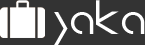
<style>
.page{position:relative;width:145px;height:45px;background:#333333}
.page>*{position:absolute;margin:0}
.t1{font:45px "DissolveRegular";color:#ffffff}
</style>
<div class="page">
<p class="t1" style="left:54px;top:0px;width:91px;height:45px">yaka</p>
</div>
